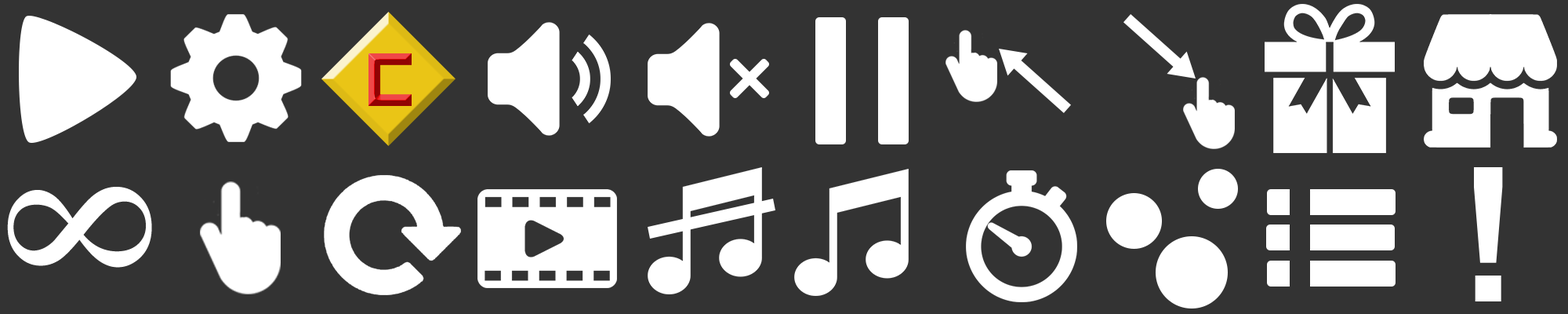
<style>
.page{position:relative;width:1568px;height:314px;background:#333333}
.page>*{position:absolute;margin:0}
.t1{font:189.7px "AldotheApache";color:#ffffff}
.t2{font:209.2px "TimesNewRomanPSMT";color:#ffffff}
</style>
<div class="page">
<p class="t1" style="left:1474px;top:167px;width:29px;height:134px">!</p>
<p class="t2" style="left:7px;top:187px;width:145px;height:80px;rotate:-90deg">8</p>
</div>
